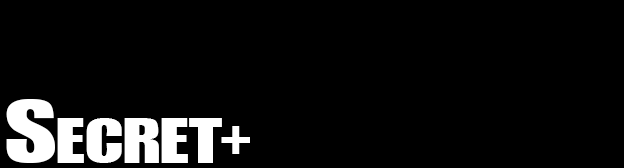
<style>
.page{position:relative;width:624px;height:168px;background:#000000}
.page>*{position:absolute;margin:0}
.t1{font:86.7px "Genuine";color:#ffffff;font-variant:small-caps;scale:1.34 1}
.t2{font:56px "Genuine";color:#ffffff;font-variant:small-caps}
</style>
<div class="page">
<p class="t1" style="left:6px;top:99px;width:216px;height:64px">Secret</p>
<p class="t2" style="left:221px;top:126px;width:29px;height:28px">+</p>
</div>
